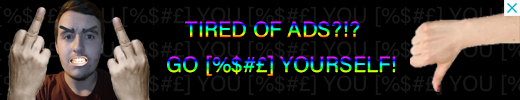
<style>
.page{position:relative;width:520px;height:100px;background:#000000}
.page>*{position:absolute;margin:0}
.t1{font:22px "AcuminConcept-Regular"}
</style>
<div class="page">
<p class="t1" style="left:185px;top:21px;width:175px;height:17px">TIRED OF ADS?!?</p>
<p class="t1" style="left:167px;top:55px;width:229px;height:21px">GO [%$#£] YOURSELF!</p>
</div>
